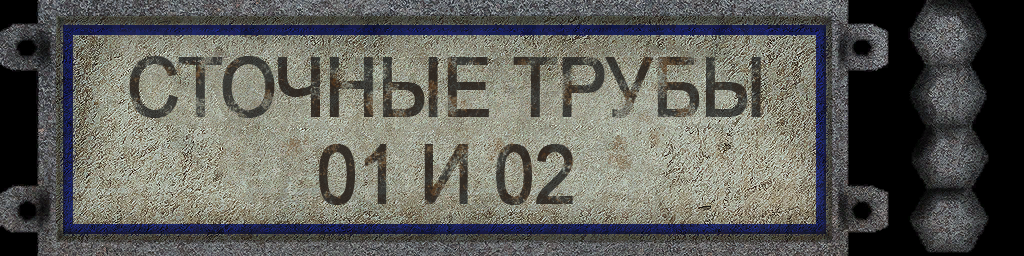
<style>
.page{position:relative;width:1024px;height:256px}
.page>*{position:absolute;margin:0}
.t1{font:82px/87px "ArialMT";letter-spacing:-0.02em;color:#3b3932;font-weight:bold;scale:0.89 1}
</style>
<div class="page">
<p class="t1" style="left:129px;top:56px;width:632px;height:149px;text-align:center">СТОЧНЫЕ ТРУБЫ<br>01 И 02</p>
</div>
